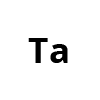
<style>
.page{position:relative;width:100px;height:100px;background:#ffffff}
.page>*{position:absolute;margin:0}
.t1{font:35px "OpenSans-Bold";color:#000000}
</style>
<div class="page">
<p class="t1" style="left:28px;top:38px;width:40px;height:25px">Ta</p>
</div>
